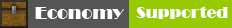
<style>
.page{position:relative;width:232px;height:28px;background:#555555}
.page>*{position:absolute;margin:0}
.t1{font:16px "Broadway";color:#ffffff}
.t2{font:18px "Broadway";color:#ffffff}
</style>
<div class="page">
<p class="t1" style="left:136px;top:6px;width:92px;height:13px">Supported</p>
<p class="t2" style="left:35px;top:7px;width:89px;height:12px">Economy</p>
</div>
